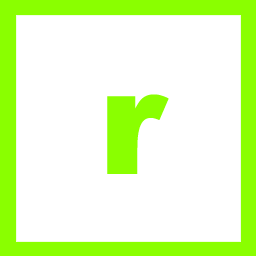
<style>
.page{position:relative;width:256px;height:256px;background:#ffffff}
.page>*{position:absolute;margin:0}
.t1{font:150px "Arial-Black";color:#8aff00}
</style>
<div class="page">
<p class="t1" style="left:107px;top:94px;width:62px;height:80px">r</p>
</div>
